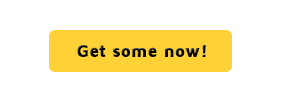
<style>
.page{position:relative;width:300px;height:100px;background:#ffffff}
.page>*{position:absolute;margin:0}
.t1{font:18px "MavenProBlack";color:#000000}
</style>
<div class="page">
<p class="t1" style="left:77px;top:45px;width:129px;height:12px">Get some now!</p>
</div>
